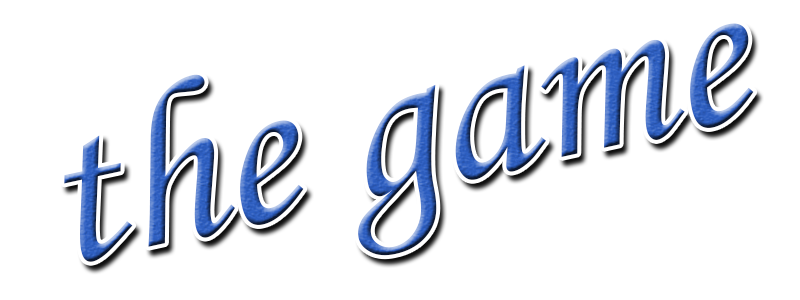
<style>
.page{position:relative;width:800px;height:300px;background:#ffffff}
.page>*{position:absolute;margin:0}
.t1{font:230px "MonotypeCorsiva"}
</style>
<div class="page">
<p class="t1" style="left:64px;top:23px;width:690px;height:239px;rotate:-12deg">the game</p>
</div>
